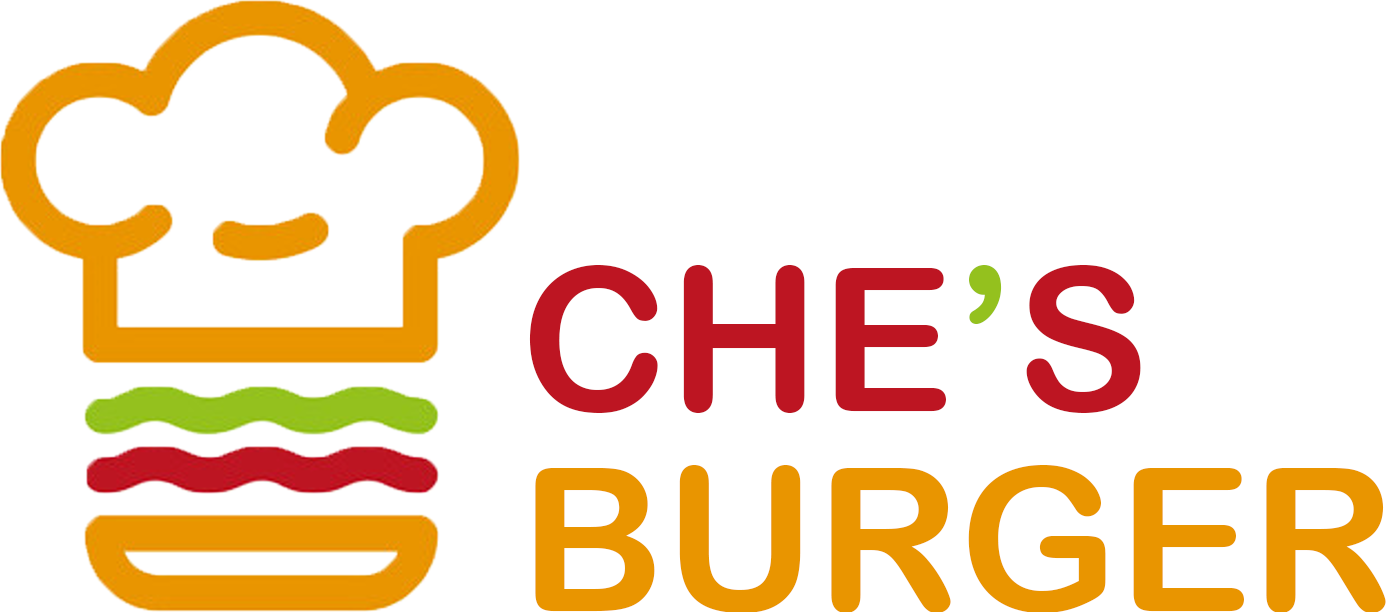
<style>
.page{position:relative;width:1386px;height:612px;background:#ffffff}
.page>*{position:absolute;margin:0}
.t1{font:200px/200px "ArialRoundedMTBold";color:#e99500}
.t2{font:200px/200px "ArialRoundedMTBold";color:#bd1522}
.t3{font:200px/200px "ArialRoundedMTBold";color:#94c11e}
</style>
<div class="page">
<p class="t1" style="left:529px;top:265px;width:857px;height:348px"><span class="t2">CHE</span><span class="t3">’</span><span class="t2">S<br></span>BURGER</p>
</div>
